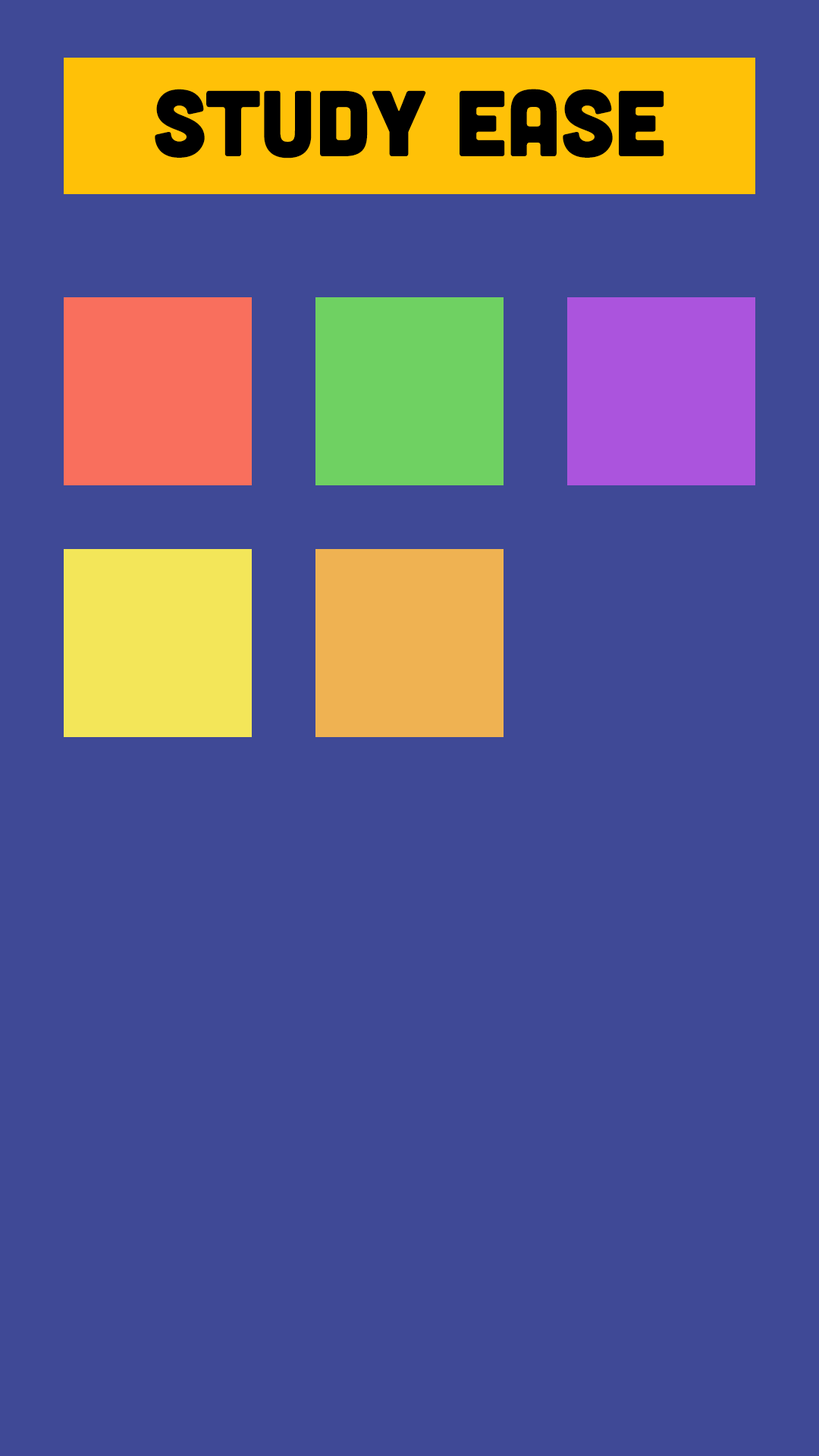
<style>
.page{position:relative;width:819px;height:1456px;background:#3f4996}
.page>*{position:absolute;margin:0}
.t1{font:93.3px "Cubano-Normal";color:#000000}
</style>
<div class="page">
<p class="t1" style="left:155px;top:89px;width:509px;height:69px">Study Ease</p>
</div>
